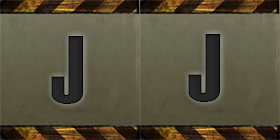
<style>
.page{position:relative;width:280px;height:140px}
.page>*{position:absolute;margin:0}
.t1{font:95px "Haettenschweiler";letter-spacing:0.1em;color:#282828}
</style>
<div class="page">
<p class="t1" style="left:51px;top:36px;width:33px;height:68px">J</p>
<p class="t1" style="left:188px;top:34px;width:33px;height:68px">J</p>
</div>
